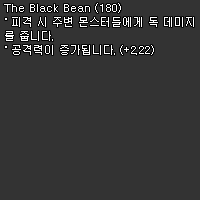
<style>
.page{position:relative;width:200px;height:200px;background:#333333}
.page>*{position:absolute;margin:0}
.t1{font:11px/14px "Dotum";color:#ffffff}
</style>
<div class="page">
<p class="t1" style="left:4px;top:3px;width:190px;height:52px">The Black Bean (180)<br>˚ 피격 시 주변 몬스터들에게 독 데미지<br>를 줍니다.<br>˚ 공격력이 증가됩니다. (+2.22)</p>
</div>
